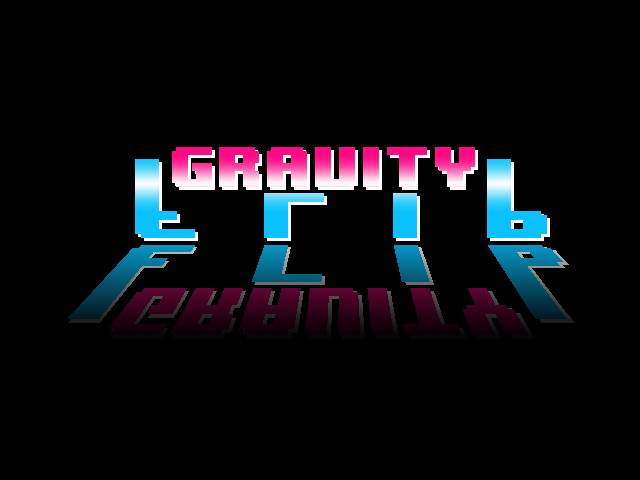
<style>
.page{position:relative;width:640px;height:480px;background:#000000}
.page>*{position:absolute;margin:0}
.t1{font:48px "8BITWONDERNominal"}
.t2{font:54px "8BITWONDERNominal";letter-spacing:0.8em;color:#09c2ff;scale:1.33 1}
</style>
<div class="page">
<p class="t1" style="left:172px;top:147px;width:303px;height:40px">Gravity</p>
<p class="t2" style="left:135px;top:193px;width:412px;height:45px">Flip</p>
</div>
